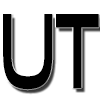
<style>
.page{position:relative;width:100px;height:100px;background:#ffffff}
.page>*{position:absolute;margin:0}
.t1{font:101.5px "GoodTimesRg-Regular";color:#000000;scale:0.61 1}
</style>
<div class="page">
<p class="t1" style="left:3px;top:14px;width:96px;height:76px">uT</p>
</div>
